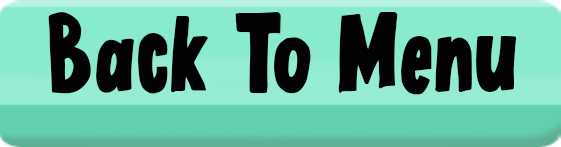
<style>
.page{position:relative;width:561px;height:147px;background:#89ebce}
.page>*{position:absolute;margin:0}
.t1{font:104.2px "LuTunaFREE";color:#020202}
</style>
<div class="page">
<p class="t1" style="left:48px;top:12px;width:469px;height:83px">Back To Menu</p>
</div>
